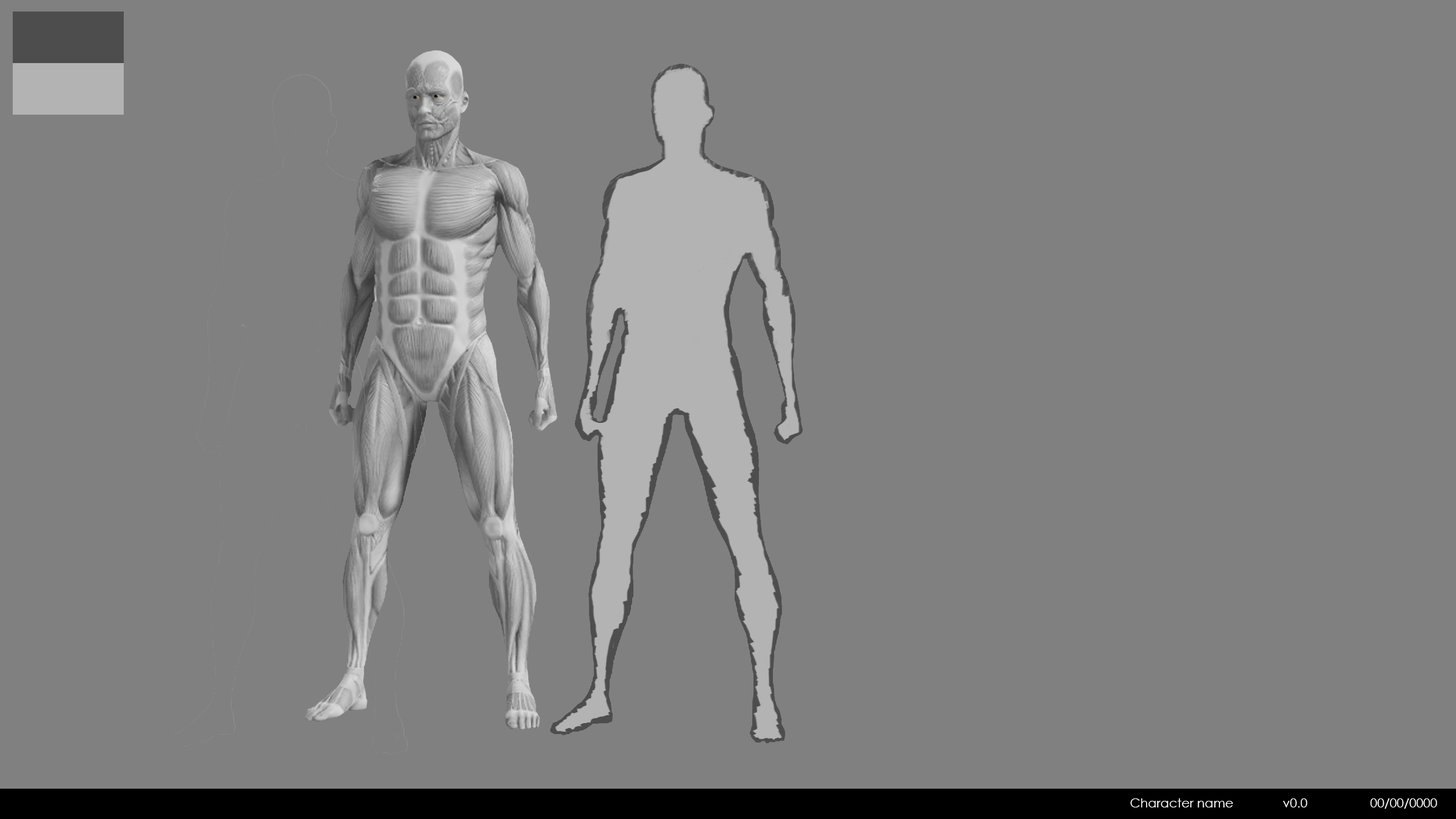
<style>
.page{position:relative;width:1456px;height:819px;background:#808080}
.page>*{position:absolute;margin:0}
.t1{font:12.6px "CenturyGothic";color:#ffffff}
</style>
<div class="page">
<p class="t1" style="left:1130px;top:798px;width:307px;height:11px">Character name   v0.0   00/00/0000</p>
</div>
